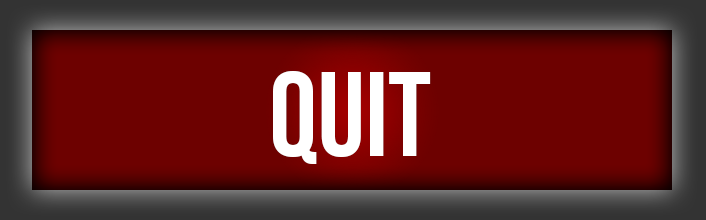
<style>
.page{position:relative;width:706px;height:220px;background:#6d0100}
.page>*{position:absolute;margin:0}
.t1{font:120px "BebasNeue-Regular";color:#ffffff}
</style>
<div class="page">
<p class="t1" style="left:273px;top:71px;width:158px;height:93px">Quit</p>
</div>
